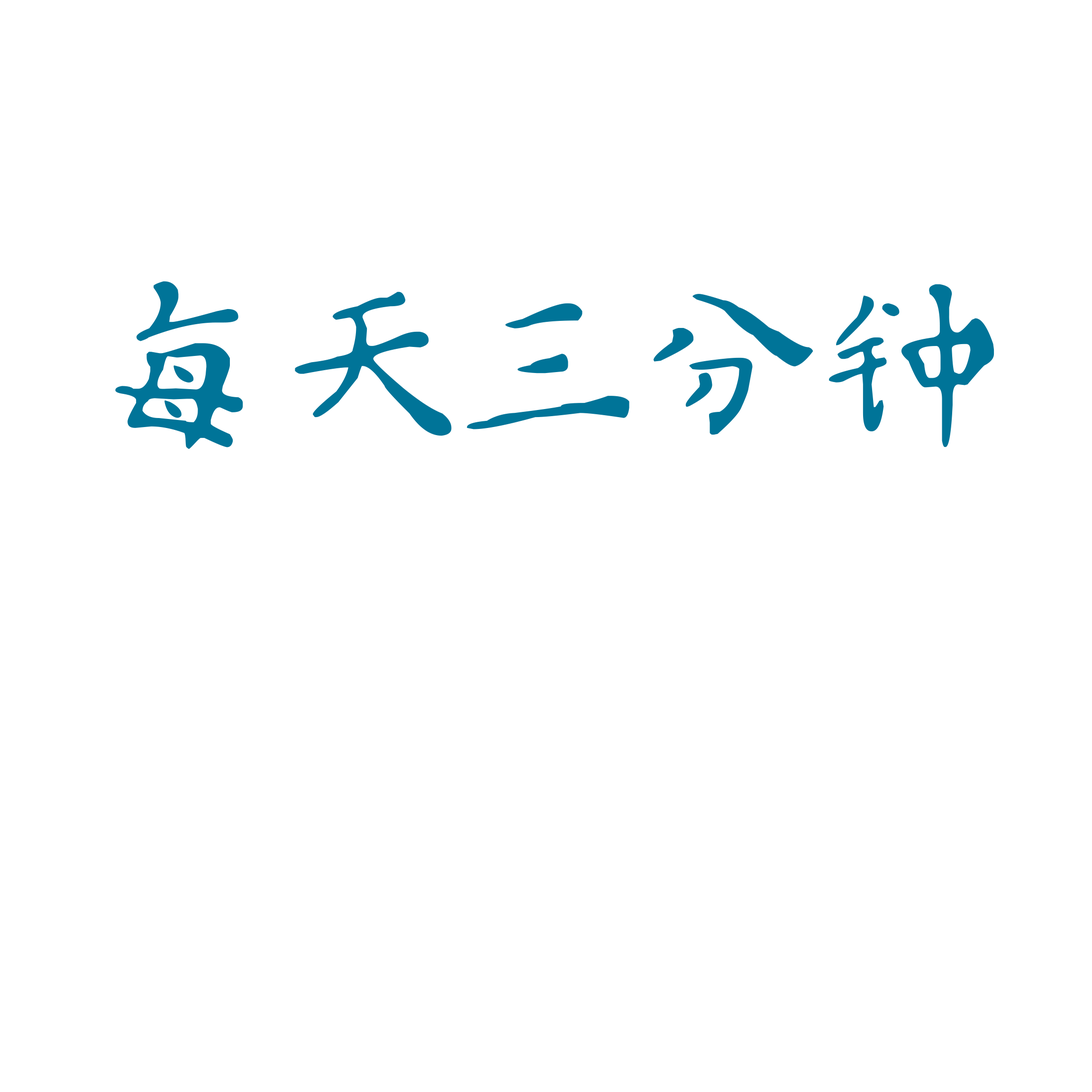
<style>
.page{position:relative;width:1092px;height:1092px;background:#ffffff}
.page>*{position:absolute;margin:0}
.t1{font:182px "STFWZMKTJW--GB1-0";color:#007498}
</style>
<div class="page">
<p class="t1" style="left:115px;top:281px;width:879px;height:168px">每天三分钟</p>
</div>
